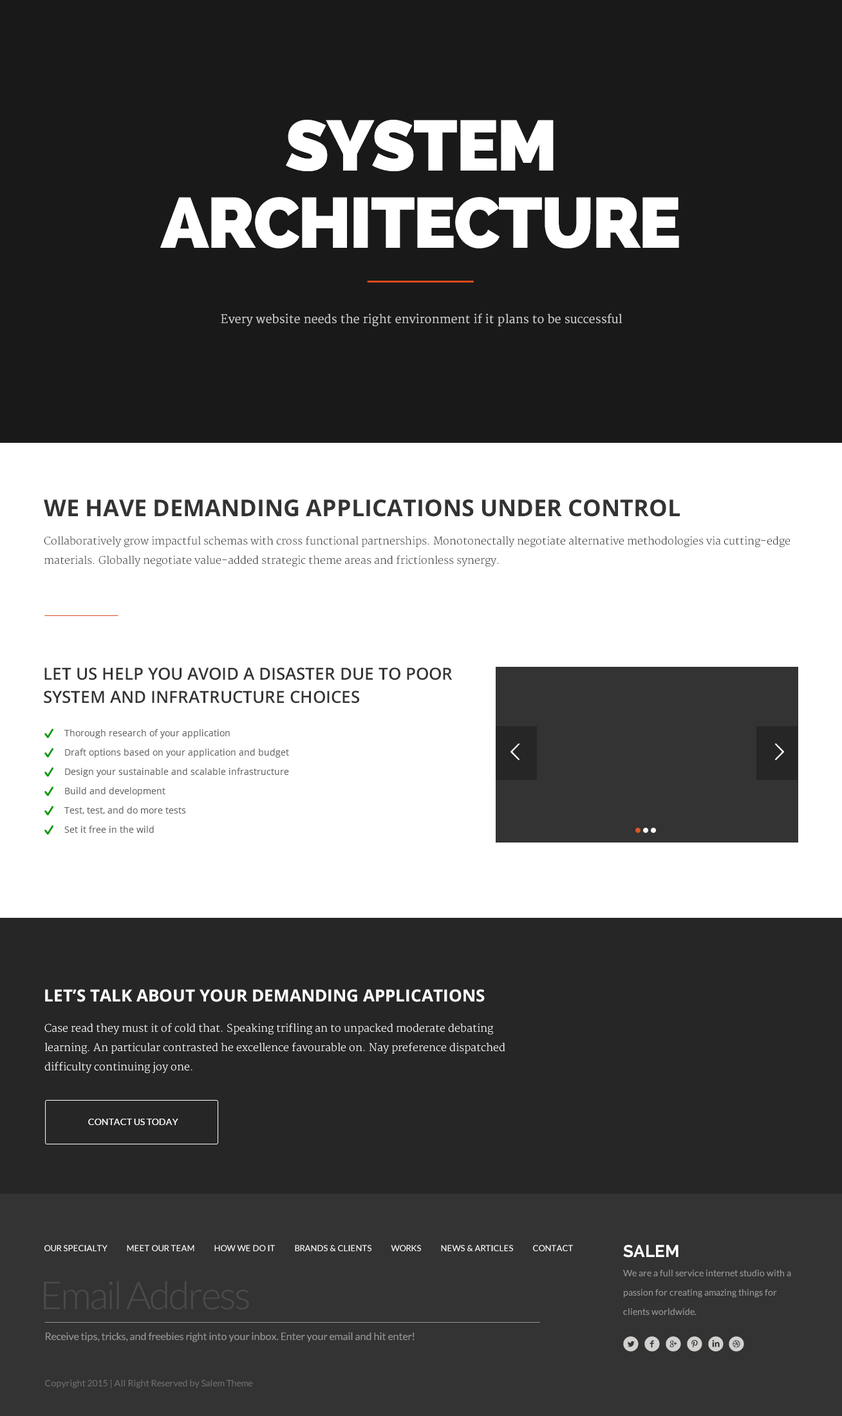
<style>
.page{position:relative;width:842px;height:1416px;background:#191919}
.page>*{position:absolute;margin:0}
.t1{font:70.8px/77.2px "Raleway-Heavy";letter-spacing:-0.025em;color:#ffffff;text-transform:uppercase}
.t2{font:11.6px "Merriweather";color:#cccccc}
.t3{font:23.2px "OpenSans-Bold";color:#333333;text-transform:uppercase}
.t4{font:10.3px/19.3px "Merriweather-Light";color:#333333}
.t5{font:16.7px/23.2px "OpenSans-Semibold";color:#333333;text-transform:uppercase}
.t6{font:9px/19.3px "OpenSans";color:#646464}
.t7{font:16.7px "OpenSans-Bold";color:#ffffff;text-transform:uppercase}
.t8{font:10.3px/19.3px "Merriweather-Light";color:#ffffff}
.t9{font:9px "Lato-Regular";color:#ffffff;text-transform:uppercase}
.t10{font:8.4px "Lato-Regular";color:#ffffff;text-transform:uppercase}
.t11{font:9px/19.3px "Lato-Regular";color:#999999}
.t12{font:16.7px/23.2px "Raleway-Bold";color:#ffffff}
.t13{font:38.6px "Lato-Light";letter-spacing:-0.05em;color:#4c4b4b}
.t14{font:10.3px "Lato-Regular";color:#999999}
.t15{font:9px "Lato-Regular";color:#6e6e6e}
</style>
<div class="page">
<p class="t1" style="left:160px;top:120px;width:519px;height:128px;text-align:center">system<br>architecture</p>
<p class="t2" style="left:221px;top:313px;width:401px;height:13px">Every website needs the right environment if it plans to be successful</p>
<p class="t3" style="left:44px;top:500px;width:636px;height:17px">we have demanding applications under control</p>
<p class="t4" style="left:44px;top:536px;width:746px;height:31px">Collaboratively grow impactful schemas with cross functional partnerships. Monotonectally negotiate alternative methodologies via cutting-edge materials. Globally negotiate value-added strategic theme areas and frictionless synergy.</p>
<p class="t5" style="left:44px;top:668px;width:409px;height:36px">let us help you avoid a disaster due to poor<br>system and infratructure choices</p>
<p class="t6" style="left:64px;top:729px;width:225px;height:104px">Thorough research of your application<br>Draft options based on your application and budget<br>Design your sustainable and scalable infrastructure<br>Build and development<br>Test, test, and do more tests<br>Set it free in the wild</p>
<p class="t7" style="left:45px;top:989px;width:440px;height:13px">let’s talk about your demanding applications</p>
<p class="t8" style="left:44px;top:1023px;width:461px;height:51px">Case read they must it of cold that. Speaking trifling an to unpacked moderate debating learning. An particular contrasted he excellence favourable on. Nay preference dispatched difficulty continuing joy one.</p>
<p class="t9" style="left:88px;top:1119px;width:90px;height:6px">contact us today</p>
<p class="t10" style="left:44px;top:1245px;width:529px;height:6px">Our Specialty          Meet Our Team          How We Do It          Brands &amp; Clients          Works          News &amp; Articles          Contact</p>
<p class="t11" style="left:623px;top:1245px;width:168px;height:70px"><span class="t12">SALEM<br></span>We are a full service internet studio with a passion for creating amazing things for clients worldwide.</p>
<p class="t13" style="left:44px;top:1281px;width:205px;height:29px">Email Address</p>
<p class="t14" style="left:46px;top:1333px;width:369px;height:9px">Receive tips, tricks, and freebies right into your inbox. Enter your email and hit enter!</p>
<p class="t15" style="left:45px;top:1380px;width:208px;height:9px">Copyright 2015 | All Right Reserved by Salem Theme</p>
</div>
